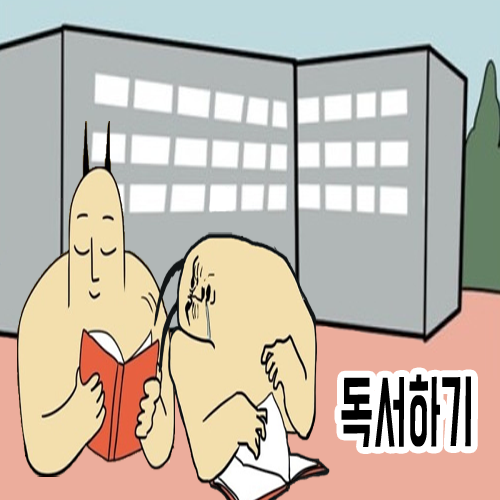
<style>
.page{position:relative;width:500px;height:500px}
.page>*{position:absolute;margin:0}
.t1{font:73.7px "BMDoHyeon";color:#000000;scale:0.47 1}
</style>
<div class="page">
<p class="t1" style="left:341px;top:374px;width:130px;height:73px">독서하기</p>
</div>
